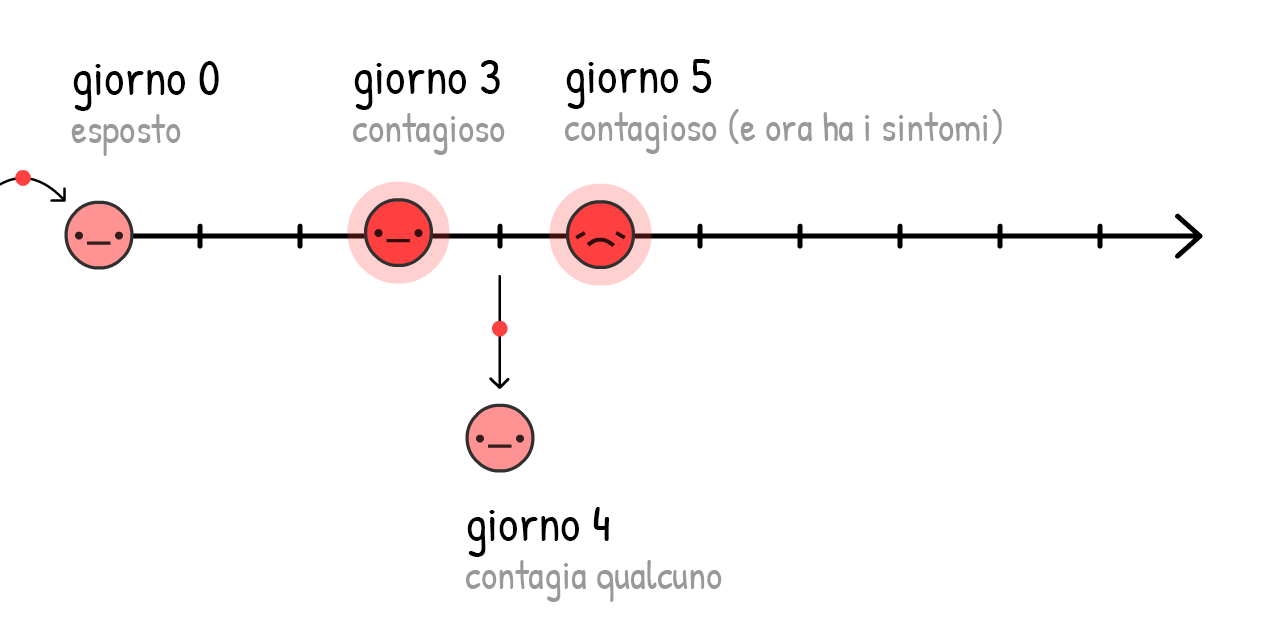
<style>
.page{position:relative;width:1280px;height:640px;background:#ffffff}
.page>*{position:absolute;margin:0}
.t1{font:50px "PatrickHand-Regular";color:#000000}
.t2{font:40px "PatrickHand-Regular";color:#999999}
</style>
<div class="page">
<p class="t1" style="left:71px;top:61px;width:148px;height:95px">giorno 0<br><span class="t2">esposto</span></p>
<p class="t2" style="left:353px;top:60px;width:152px;height:95px"><span class="t1">giorno 3<br></span>contagioso</p>
<p class="t2" style="left:565px;top:59px;width:437px;height:95px"><span class="t1">giorno 5<br></span>contagioso (e ora ha i sintomi)</p>
<p class="t2" style="left:466px;top:507px;width:256px;height:95px"><span class="t1">giorno 4<br></span>contagia qualcuno</p>
</div>
